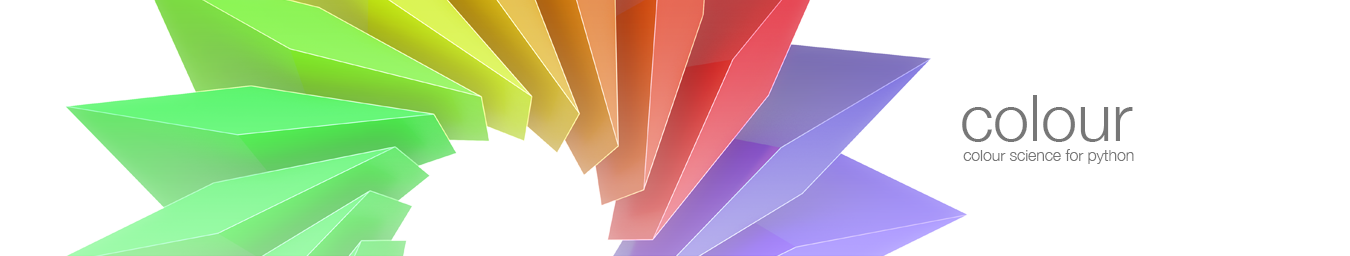
<style>
.page{position:relative;width:1350px;height:256px;background:#ffffff}
.page>*{position:absolute;margin:0}
.t1{font:65.4px "HelveticaNeue-Light";color:#777777}
.t2{font:16.1px "HelveticaNeue-Light";color:#777777}
</style>
<div class="page">
<p class="t1" style="left:962px;top:95px;width:171px;height:47px">colour</p>
<p class="t2" style="left:963px;top:149px;width:171px;height:15px">colour science for python</p>
</div>
